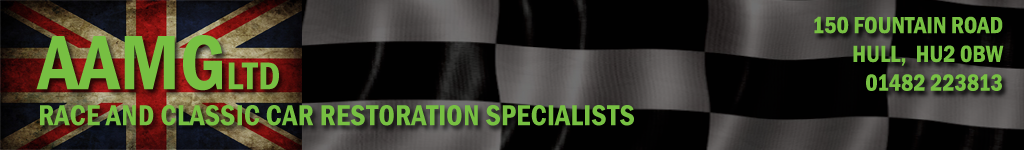
<style>
.page{position:relative;width:1024px;height:150px;background:#010101}
.page>*{position:absolute;margin:0}
.t1{font:24px "FranklinGothic-DemiCond";color:#77bf42}
.t2{font:30px "FranklinGothic-DemiCond";color:#77bf42}
.t3{font:80px "FranklinGothic-DemiCond";color:#77bf42}
.t4{font:40px "FranklinGothic-DemiCond";color:#77bf42}
</style>
<div class="page">
<p class="t1" style="left:814px;top:16px;width:190px;height:75px;text-align:right">150 FOUNTAIN ROAD<br>HULL,  HU2 0BW<br>01482 223813</p>
<p class="t2" style="left:36px;top:35px;width:598px;height:91px"><span class="t3">AAMG</span><span class="t4">LTD<br></span>RACE AND CLASSIC CAR RESTORATION SPECIALISTS</p>
</div>
